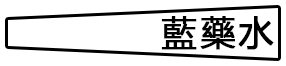
<style>
.page{position:relative;width:286px;height:66px;background:#ffffff}
.page>*{position:absolute;margin:0}
.t1{font:35px "MicrosoftYaHei";letter-spacing:0.06em;color:#000000;font-weight:bold}
</style>
<div class="page">
<p class="t1" style="left:161px;top:16px;width:113px;height:34px">藍藥水</p>
</div>
